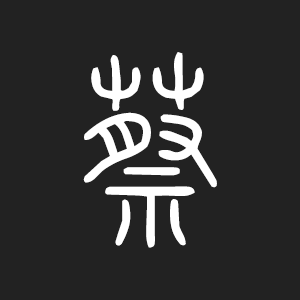
<style>
.page{position:relative;width:300px;height:300px;background:#222222}
.page>*{position:absolute;margin:0}
.t1{font:200px "¥_®v¤j»¡¤å¤p½f";color:#ffffff}
</style>
<div class="page">
<p class="t1" style="left:83px;top:52px;width:134px;height:196px">蔡</p>
</div>
